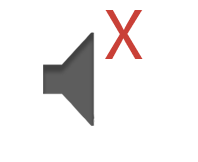
<style>
.page{position:relative;width:198px;height:162px;background:#ffffff}
.page>*{position:absolute;margin:0}
.t1{font:72px "MyriadPro-Regular";color:#c94037}
</style>
<div class="page">
<p class="t1" style="left:105px;top:10px;width:38px;height:49px">X</p>
</div>
